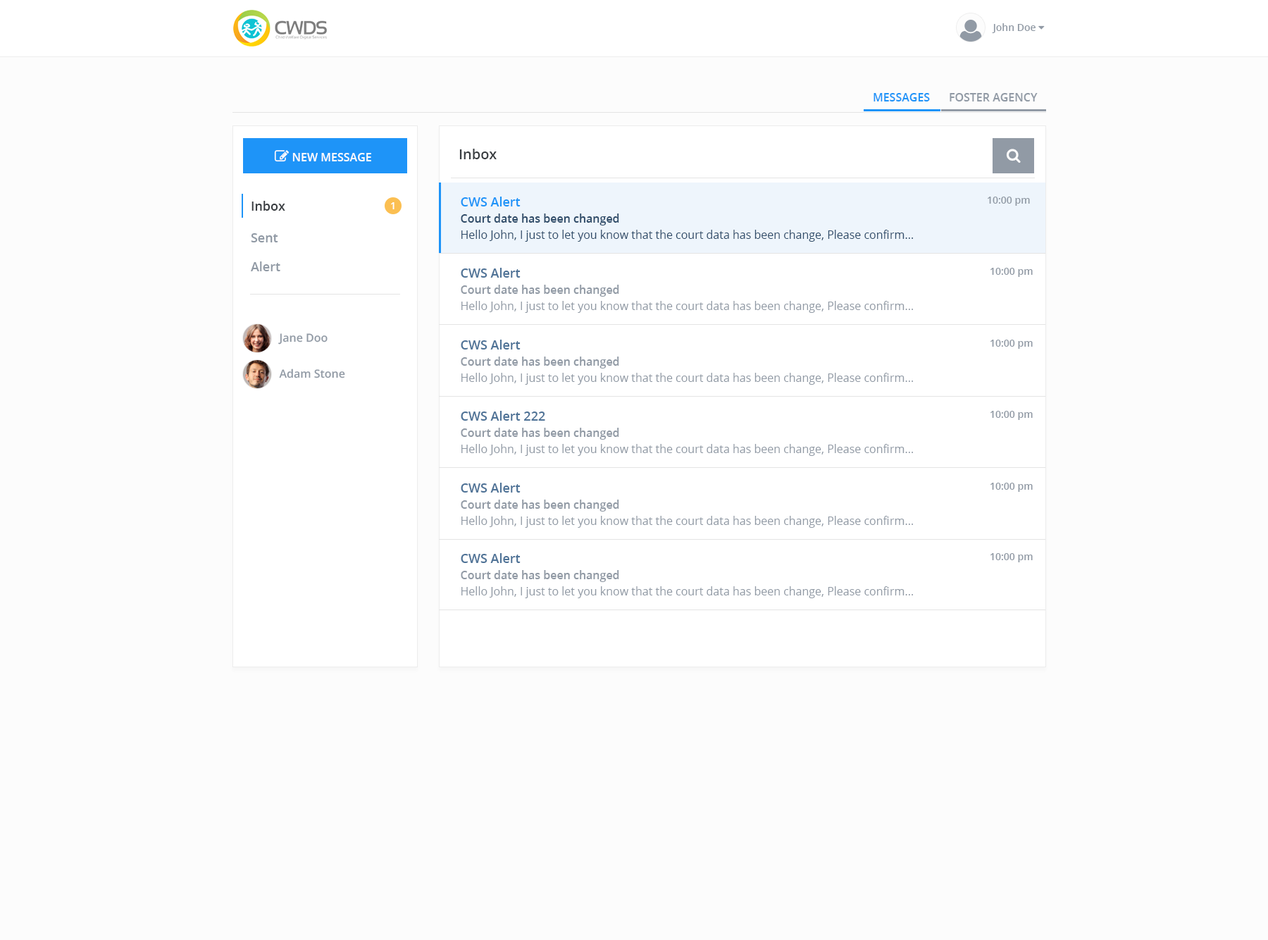
<style>
.page{position:relative;width:1268px;height:940px;background:#fcfcfc}
.page>*{position:absolute;margin:0}
.t1{font:11.3px "OpenSans-Semibold";color:#1e94f8;text-transform:uppercase}
.t2{font:11.3px "OpenSans-Semibold";color:#919aa5;text-transform:uppercase}
.t3{font:14.1px "OpenSans-Semibold";color:#393d41}
.t4{font:12.7px "OpenSans-Semibold";color:#1e94f8}
.t5{font:9.9px "OpenSans-Semibold";color:#919aa5}
.t6{font:12.7px "OpenSans-Semibold";color:#393d41}
.t7{font:9.9px "OpenSans-Semibold";color:#ffffff}
.t8{font:11.3px "OpenSans-Semibold";color:#304d6a}
.t9{font:12.7px "OpenSans-Semibold";color:#919aa5}
.t10{font:11.3px "OpenSans";color:#304d6a}
.t11{font:12.7px "OpenSans-Semibold";color:#4f7397}
.t12{font:11.3px "OpenSans-Semibold";color:#919aa5}
.t13{font:11.3px "OpenSans";color:#919aa5}
</style>
<div class="page">
<p class="t1" style="left:874px;top:93px;width:56px;height:8px">Messages</p>
<p class="t2" style="left:950px;top:93px;width:88px;height:8px">foster agency</p>
<p class="t3" style="left:459px;top:149px;width:38px;height:10px">Inbox</p>
<p class="t4" style="left:461px;top:197px;width:60px;height:9px">CWS Alert</p>
<p class="t5" style="left:988px;top:197px;width:42px;height:9px">10:00 pm</p>
<p class="t6" style="left:252px;top:201px;width:33px;height:10px">Inbox</p>
<p class="t7" style="left:391px;top:202px;width:4px;height:7px">1</p>
<p class="t8" style="left:461px;top:214px;width:158px;height:12px">Court date has been changed</p>
<p class="t9" style="left:251px;top:233px;width:27px;height:9px">Sent</p>
<p class="t10" style="left:462px;top:230px;width:451px;height:12px">Hello John, I just to let you know that the court data has been change, Please confirm...</p>
<p class="t9" style="left:251px;top:261px;width:29px;height:10px">Alert</p>
<p class="t11" style="left:461px;top:268px;width:60px;height:10px">CWS Alert</p>
<p class="t5" style="left:991px;top:268px;width:42px;height:9px">10:00 pm</p>
<p class="t12" style="left:461px;top:285px;width:158px;height:12px">Court date has been changed</p>
<p class="t13" style="left:462px;top:301px;width:451px;height:12px">Hello John, I just to let you know that the court data has been change, Please confirm...</p>
<p class="t12" style="left:278px;top:333px;width:50px;height:12px">Jane Doo</p>
<p class="t11" style="left:461px;top:340px;width:60px;height:10px">CWS Alert</p>
<p class="t5" style="left:991px;top:340px;width:42px;height:9px">10:00 pm</p>
<p class="t12" style="left:461px;top:357px;width:158px;height:12px">Court date has been changed</p>
<p class="t12" style="left:279px;top:369px;width:66px;height:9px">Adam Stone</p>
<p class="t13" style="left:462px;top:373px;width:451px;height:12px">Hello John, I just to let you know that the court data has been change, Please confirm...</p>
<p class="t11" style="left:461px;top:411px;width:84px;height:10px">CWS Alert 222</p>
<p class="t5" style="left:991px;top:411px;width:42px;height:9px">10:00 pm</p>
<p class="t12" style="left:461px;top:428px;width:158px;height:12px">Court date has been changed</p>
<p class="t13" style="left:462px;top:444px;width:451px;height:12px">Hello John, I just to let you know that the court data has been change, Please confirm...</p>
<p class="t11" style="left:461px;top:483px;width:60px;height:10px">CWS Alert</p>
<p class="t5" style="left:991px;top:483px;width:42px;height:9px">10:00 pm</p>
<p class="t12" style="left:461px;top:500px;width:158px;height:12px">Court date has been changed</p>
<p class="t13" style="left:462px;top:516px;width:451px;height:12px">Hello John, I just to let you know that the court data has been change, Please confirm...</p>
<p class="t11" style="left:461px;top:553px;width:60px;height:10px">CWS Alert</p>
<p class="t5" style="left:991px;top:553px;width:42px;height:9px">10:00 pm</p>
<p class="t12" style="left:461px;top:570px;width:158px;height:12px">Court date has been changed</p>
<p class="t13" style="left:462px;top:586px;width:451px;height:12px">Hello John, I just to let you know that the court data has been change, Please confirm...</p>
</div>
